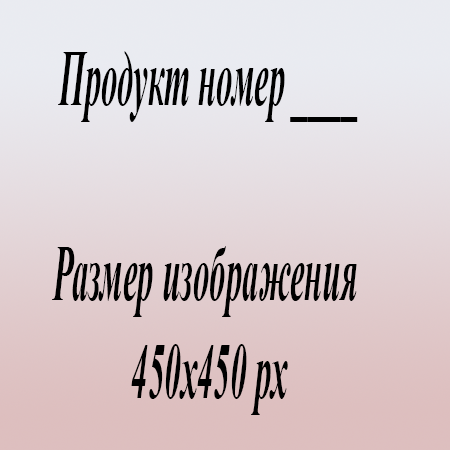
<style>
.page{position:relative;width:450px;height:450px}
.page>*{position:absolute;margin:0}
.t1{font:81.4px "TimesNewRomanPS-BoldItalicMT";color:#000000;scale:0.4 1}
</style>
<div class="page">
<p class="t1" style="left:52px;top:51px;width:306px;height:364px;text-align:center">Продукт номер ____<br><br>Размер изображения <br>450х450 px</p>
</div>
